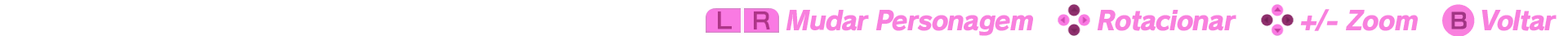
<style>
.page{position:relative;width:1568px;height:36px;background:#ffffff}
.page>*{position:absolute;margin:0}
.t1{font:26.1px "RodinPro-EB";letter-spacing:-0.046em;color:#f880de;font-style:italic}
</style>
<div class="page">
<p class="t1" style="left:786px;top:10px;width:247px;height:26px">Mudar Personagem</p>
<p class="t1" style="left:1097px;top:10px;width:139px;height:21px">Rotacionar</p>
<p class="t1" style="left:1300px;top:9px;width:118px;height:22px">+/- Zoom</p>
<p class="t1" style="left:1481px;top:10px;width:76px;height:21px">Voltar</p>
</div>
